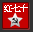
<style>
.page{position:relative;width:33px;height:32px;background:#c50000}
.page>*{position:absolute;margin:0}
.t1{font:10.4px "SimSun";letter-spacing:-0.25em;color:#ffffff}
</style>
<div class="page">
<p class="t1" style="left:4px;top:4px;width:24px;height:8px">红七十</p>
</div>
